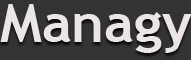
<style>
.page{position:relative;width:191px;height:60px;background:#333333}
.page>*{position:absolute;margin:0}
.t1{font:53.2px "TrebuchetMS-Bold";color:#ebe5e5;scale:1.05 1}
</style>
<div class="page">
<p class="t1" style="left:0px;top:4px;width:192px;height:49px">Managy</p>
</div>
